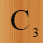
<style>
.page{position:relative;width:43px;height:43px}
.page>*{position:absolute;margin:0}
.t1{font:30px "TimesNewRomanPSMT";color:#0c0c0b}
.t2{font:12px "TimesNewRomanPSMT";color:#0c0c0b}
</style>
<div class="page">
<p class="t1" style="left:11px;top:10px;width:18px;height:20px">C</p>
<p class="t2" style="left:33px;top:28px;width:5px;height:9px">3</p>
</div>
